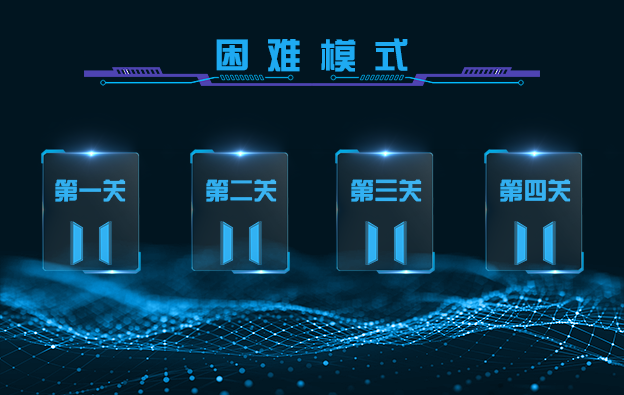
<style>
.page{position:relative;width:624px;height:395px;background:#011520}
.page>*{position:absolute;margin:0}
.t1{font:36px "BDZYJT--GB1-0";letter-spacing:0.48em;color:#1eaaf2}
.t2{font:24px "BDZYJT--GB1-0";color:#33b0f1}
.t3{font:24px "BDZYJT--GB1-0";color:#33b0f2}
.t4{font:24px "BDZYJT--GB1-0";color:#1eaaf2}
</style>
<div class="page">
<p class="t1" style="left:216px;top:38px;width:192px;height:34px">困难模式</p>
<p class="t2" style="left:55px;top:179px;width:71px;height:23px">第一关</p>
<p class="t3" style="left:206px;top:179px;width:71px;height:23px">第二关</p>
<p class="t4" style="left:351px;top:179px;width:71px;height:23px">第三关</p>
<p class="t4" style="left:500px;top:179px;width:71px;height:23px">第四关</p>
</div>
